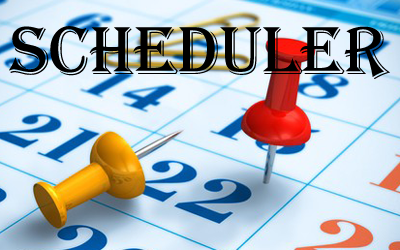
<style>
.page{position:relative;width:400px;height:250px}
.page>*{position:absolute;margin:0}
.t1{font:70px "Algerian";color:#000000}
</style>
<div class="page">
<p class="t1" style="left:9px;top:26px;width:381px;height:53px">Scheduler</p>
</div>
